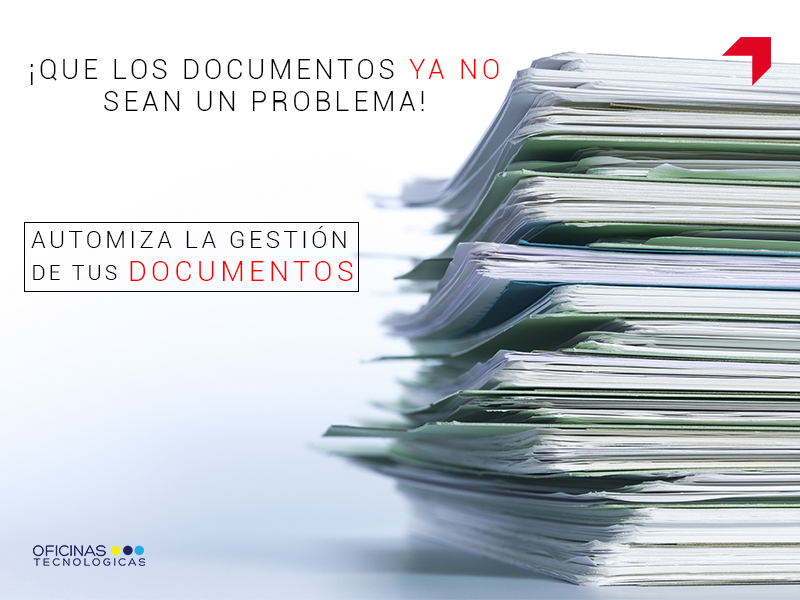
<style>
.page{position:relative;width:800px;height:600px;background:#ffffff}
.page>*{position:absolute;margin:0}
.t1{font:26.6px "Roboto-Light";letter-spacing:0.15em;color:#000000}
.t2{font:26.6px "Roboto-Light";letter-spacing:0.15em;color:#ff0000}
.t3{font:23.7px "Roboto-Light";letter-spacing:0.15em;color:#000000}
.t4{font:21px "Roboto-Light";letter-spacing:0.15em;color:#000000}
.t5{font:28.4px "Roboto-Light";letter-spacing:0.15em;color:#ff0000}
</style>
<div class="page">
<p class="t1" style="left:30px;top:59px;width:469px;height:52px;text-align:center">¡QUE LOS DOCUMENTOS <span class="t2">YA NO<br></span>SEAN UN PROBLEMA!</p>
<p class="t3" style="left:31px;top:226px;width:315px;height:22px">AUTOMIZA LA GESTIÓN</p>
<p class="t4" style="left:33px;top:265px;width:84px;height:15px">DE TUS</p>
<p class="t5" style="left:130px;top:261px;width:223px;height:20px">DOCUMENTOS</p>
</div>
